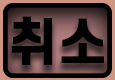
<style>
.page{position:relative;width:115px;height:80px;background:#000000}
.page>*{position:absolute;margin:0}
.t1{font:50.5px "S-CoreDream-6Bold";color:#000000;font-weight:bold}
</style>
<div class="page">
<p class="t1" style="left:11px;top:16px;width:93px;height:49px">취소</p>
</div>
